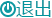
<style>
.page{position:relative;width:52px;height:18px;background:#ffffff}
.page>*{position:absolute;margin:0}
.t1{font:18px "MicrosoftYaHeiUI";color:#02949d}
</style>
<div class="page">
<p class="t1" style="left:16px;top:0px;width:35px;height:17px">退出</p>
</div>
